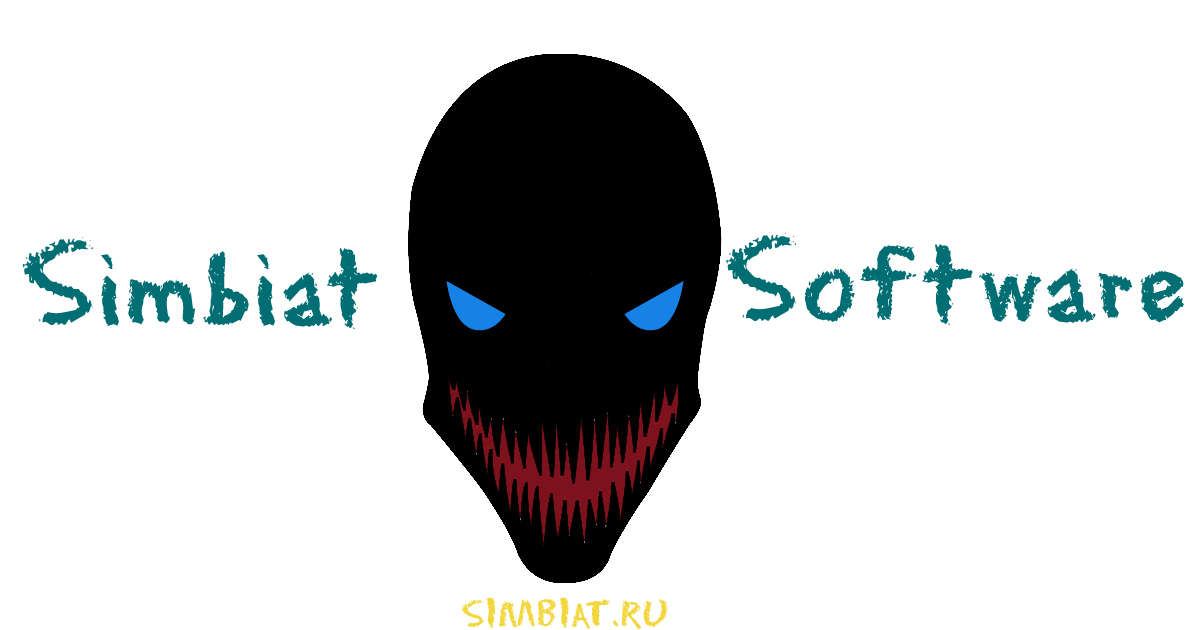
<style>
.page{position:relative;width:1200px;height:630px;background:#ffffff}
.page>*{position:absolute;margin:0}
.t1{font:110px "Eraser";color:#006e72}
.t2{font:35px "Eraser";color:#f2d63c}
</style>
<div class="page">
<p class="t1" style="left:726px;top:233px;width:458px;height:93px">Software</p>
<p class="t1" style="left:22px;top:237px;width:356px;height:93px">Simbiat</p>
<p class="t2" style="left:461px;top:597px;width:208px;height:33px">SIMBIAT.RU</p>
</div>
